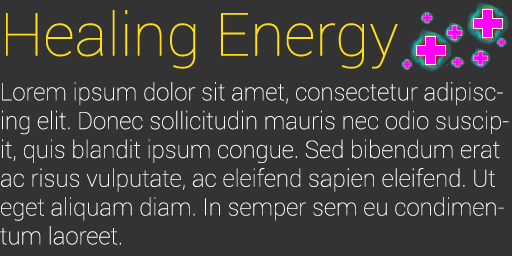
<style>
.page{position:relative;width:512px;height:256px;background:#333333}
.page>*{position:absolute;margin:0}
.t1{font:60px "Roboto-Thin";color:#ffdd17;scale:1.03 1}
.t2{font:24px "Roboto-Thin";color:#ffffff}
</style>
<div class="page">
<p class="t1" style="left:6px;top:10px;width:392px;height:59px">Healing Energy</p>
<p class="t2" style="left:0px;top:82px;width:509px;height:163px">Lorem ipsum dolor sit amet, consectetur adipiscing elit. Donec sollicitudin mauris nec odio suscipit, quis blandit ipsum congue. Sed bibendum erat ac risus vulputate, ac eleifend sapien eleifend. Ut eget aliquam diam. In semper sem eu condimentum laoreet.</p>
</div>
